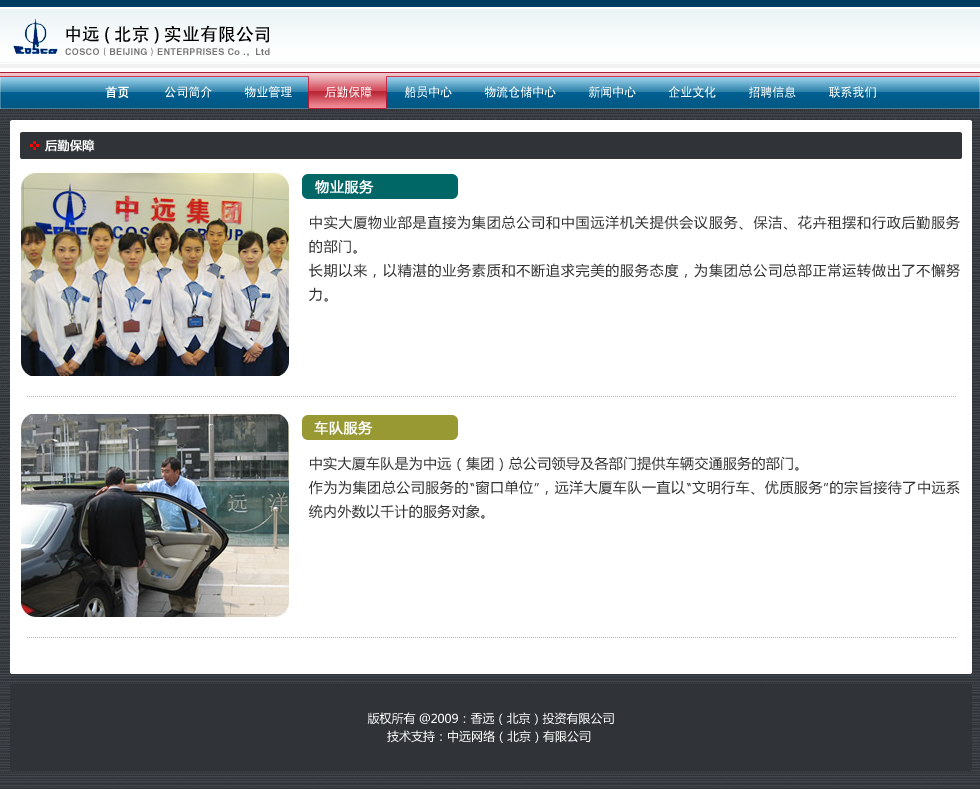
<style>
.page{position:relative;width:980px;height:789px;background:#ffffff}
.page>*{position:absolute;margin:0}
.t1{font:18px "AdobeHeitiStd-Regular";color:#000000}
.t2{font:9px "HelveticaLTStd-Bold";letter-spacing:0.04em;color:#747373}
.t3{font:9px "FZDHTJW--GB1-0";letter-spacing:0.04em;color:#747373}
.t4{font:12px "SIL-Hei-Med-Jian";color:#ffffff}
.t5{font:12px "SIL-Hei-Med-Jian";color:#ffffff;font-weight:bold}
.t6{font:12px "MicrosoftYaHei";color:#ffffff;font-weight:bold}
.t7{font:14px "MicrosoftYaHei";letter-spacing:0.02em;color:#ffffff;font-weight:bold}
.t8{font:14px/24px "MicrosoftYaHei";letter-spacing:0.04em;color:#333333}
.t9{font:14px/24px "MicrosoftYaHei";letter-spacing:0.02em;color:#333333}
.t10{font:12px/18px "MicrosoftYaHei";color:#ffffff}
</style>
<div class="page">
<p class="t1" style="left:66px;top:25px;width:203px;height:19px">中远 ( 北京 ) 实业有限公司</p>
<p class="t2" style="left:65px;top:47px;width:205px;height:10px">COSCO<span class="t3">（</span>BEIJING<span class="t3">）</span>ENTERPRISES Co .<span class="t3">，</span>Ltd</p>
<p class="t4" style="left:105px;top:86px;width:771px;height:12px"><span class="t5">首页        </span>公司简介        物业管理        后勤保障        船员中心        物流仓储中心        新闻中心        企业文化        招聘信息        联系我们</p>
<p class="t6" style="left:45px;top:139px;width:50px;height:13px">后勤保障</p>
<p class="t7" style="left:315px;top:179px;width:59px;height:15px">物业服务</p>
<p class="t8" style="left:309px;top:215px;width:651px;height:87px;text-align:justify">中实大厦物业部是直接为集团总公司和中国远洋机关提供会议服务、保洁、花卉租摆和行政后勤服务的部门。<br>长期以来，以精湛的业务素质和不断追求完美的服务态度，为集团总公司总部正常运转做出了不懈努力。</p>
<p class="t7" style="left:314px;top:420px;width:59px;height:15px">车队服务</p>
<p class="t9" style="left:309px;top:456px;width:651px;height:63px;text-align:justify">中实大厦车队是为中远（集团）总公司领导及各部门提供车辆交通服务的部门。<br>作为为集团总公司服务的“窗口单位”，远洋大厦车队一直以“文明行车、优质服务”的宗旨接待了中远系统内外数以千计的服务对象。</p>
<p class="t10" style="left:367px;top:712px;width:247px;height:31px;text-align:center">版权所有 @2009：香远（北京）投资有限公司<br>技术支持：中远网络（北京）有限公司</p>
</div>
